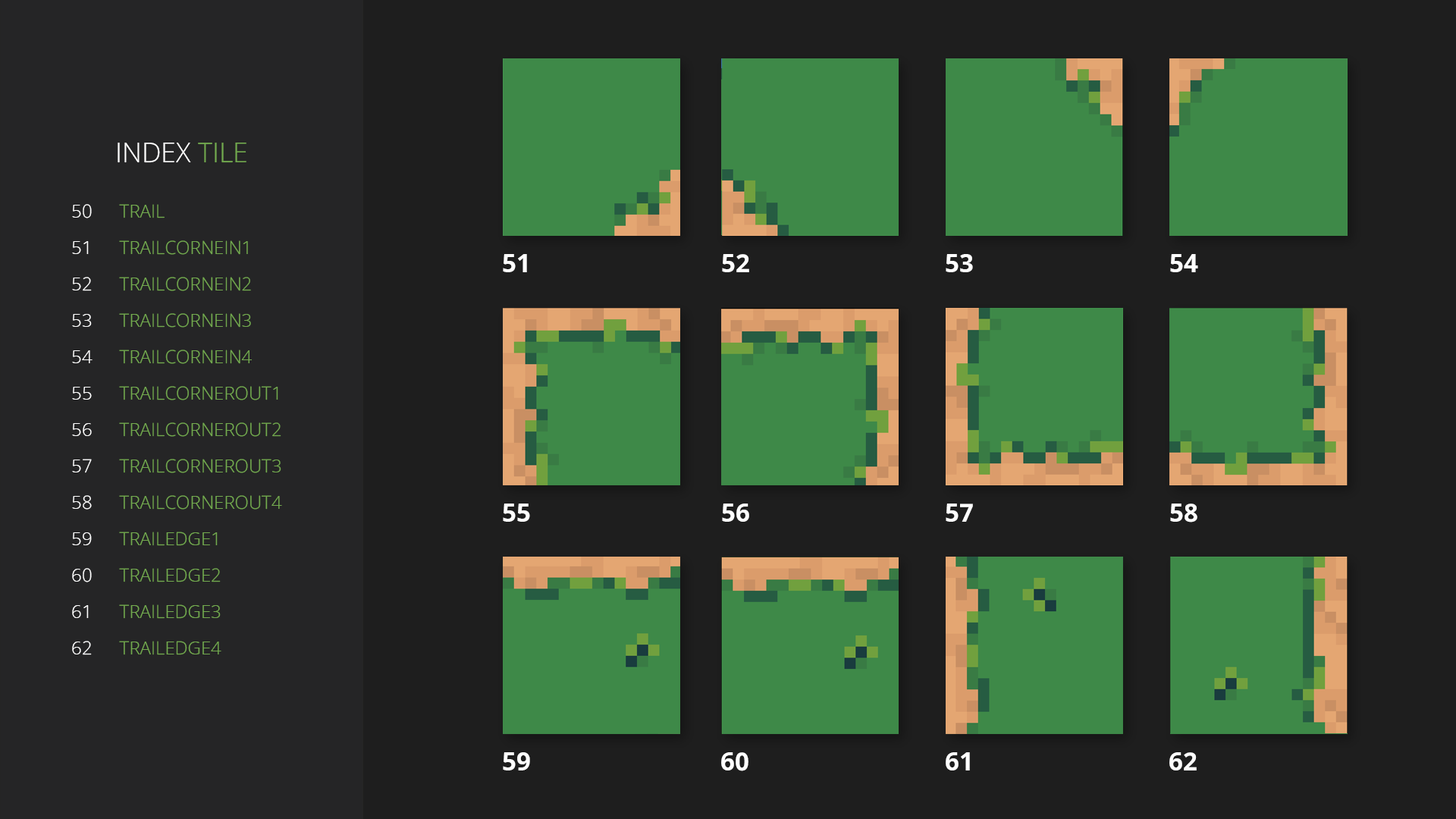
<style>
.page{position:relative;width:1456px;height:819px;background:#1e1e1e}
.page>*{position:absolute;margin:0}
.t1{font:27.3px "OpenSans-Light";color:#ffffff;text-transform:uppercase}
.t2{font:27.3px "OpenSans-Light";color:#73aa4f;text-transform:uppercase}
.t3{font:18.2px/36.4px "OpenSans-Light";color:#ffffff;text-transform:uppercase}
.t4{font:18.2px/36.4px "OpenSans-Light";color:#73aa4f;text-transform:uppercase}
.t5{font:25.1px "OpenSans-Bold";color:#ffffff;text-transform:uppercase}
</style>
<div class="page">
<p class="t1" style="left:118px;top:143px;width:128px;height:20px">index<span class="t2"> tile</span></p>
<p class="t3" style="left:72px;top:204px;width:21px;height:451px;text-align:center">50<br>51<br>52<br>53<br>54<br>55<br>56<br>57<br>58<br>59<br>60<br>61<br>62</p>
<p class="t4" style="left:119px;top:204px;width:163px;height:451px">trail<br>trailCorneIn1<br>trailCorneIn2<br>trailCorneIn3<br>trailCorneIn4<br>trailCornerOut1<br>trailCornerOut2<br>trailCornerOut3<br>trailCornerOut4<br>trailEdge1<br>trailEdge2<br>trailEdge3<br>trailEdge4</p>
<p class="t5" style="left:503px;top:254px;width:24px;height:18px">51</p>
<p class="t5" style="left:722px;top:254px;width:27px;height:18px">52</p>
<p class="t5" style="left:946px;top:254px;width:27px;height:18px">53</p>
<p class="t5" style="left:1170px;top:254px;width:28px;height:18px">54</p>
<p class="t5" style="left:503px;top:504px;width:27px;height:18px">55</p>
<p class="t5" style="left:722px;top:504px;width:27px;height:18px">56</p>
<p class="t5" style="left:946px;top:504px;width:27px;height:18px">57</p>
<p class="t5" style="left:1170px;top:504px;width:27px;height:18px">58</p>
<p class="t5" style="left:503px;top:752px;width:27px;height:18px">59</p>
<p class="t5" style="left:721px;top:752px;width:27px;height:19px">60</p>
<p class="t5" style="left:946px;top:752px;width:24px;height:18px">61</p>
<p class="t5" style="left:1169px;top:752px;width:28px;height:18px">62</p>
</div>
